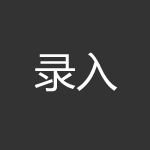
<style>
.page{position:relative;width:150px;height:150px;background:#333333}
.page>*{position:absolute;margin:0}
.t1{font:41.7px "MicrosoftYaHei";color:#ffffff}
</style>
<div class="page">
<p class="t1" style="left:34px;top:52px;width:84px;height:40px">录入</p>
</div>
